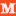
<style>
.page{position:relative;width:16px;height:16px;background:#f24b20}
.page>*{position:absolute;margin:0}
.t1{font:14px "FFFTusj-Bold";letter-spacing:0.005em;color:#f9eaeb;font-weight:bold}
</style>
<div class="page">
<p class="t1" style="left:0px;top:2px;width:16px;height:12px">M</p>
</div>
